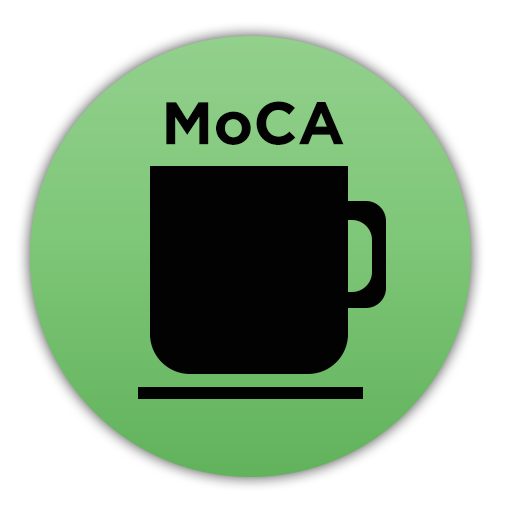
<style>
.page{position:relative;width:512px;height:512px;background:#ffffff}
.page>*{position:absolute;margin:0}
.t1{font:60px "Gotham-Bold";color:#020202}
</style>
<div class="page">
<p class="t1" style="left:166px;top:101px;width:178px;height:44px">MoCA</p>
</div>
